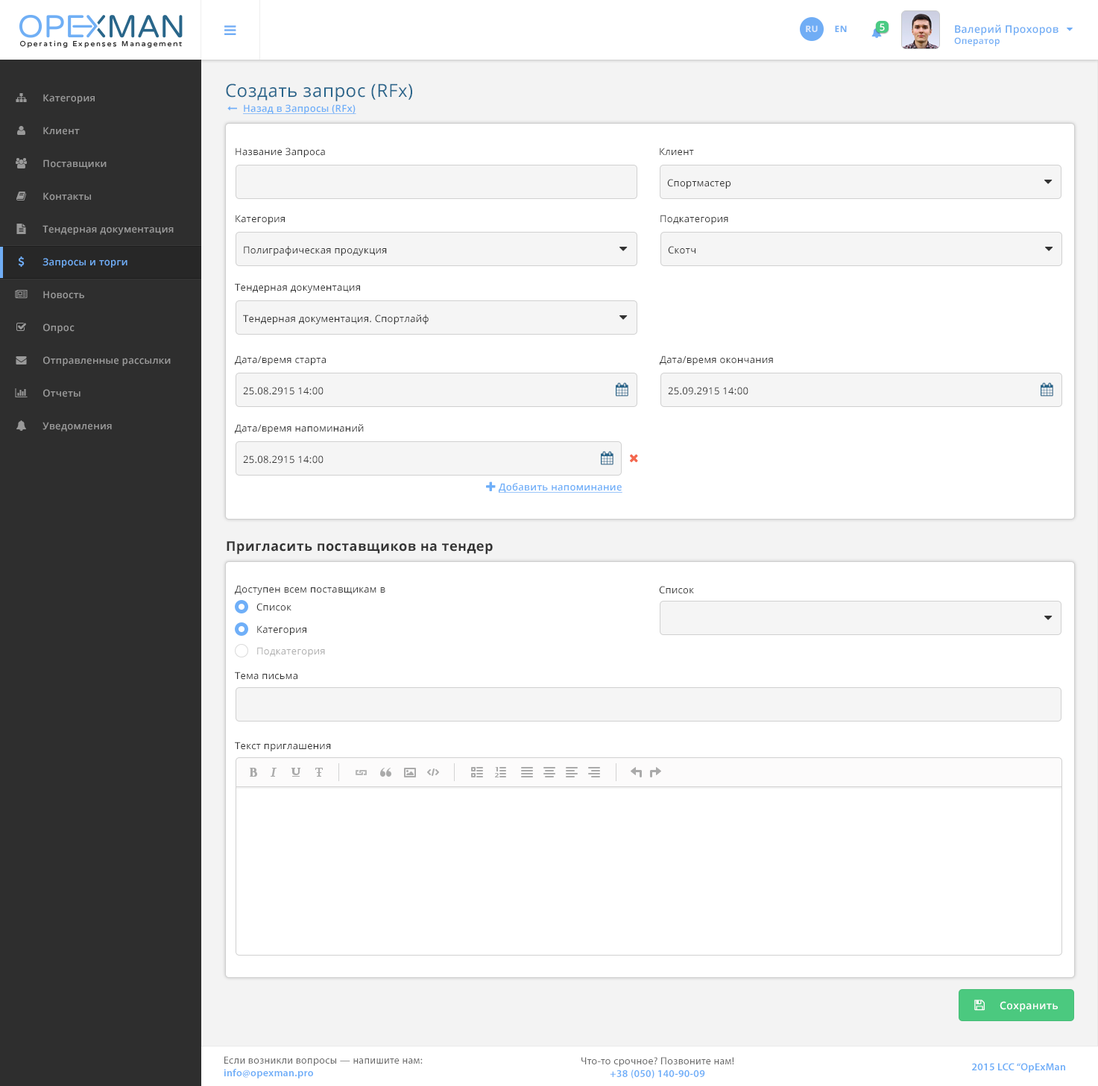
<style>
.page{position:relative;width:1098px;height:1086px;background:#ffffff}
.page>*{position:absolute;margin:0}
.t1{font:8.9px "OpenSans-Bold";letter-spacing:0.025em;color:#dbe8fc;text-transform:uppercase}
.t2{font:8.9px "OpenSans-Bold";letter-spacing:0.025em;color:#70adf5;text-transform:uppercase}
.t3{font:9.7px "OpenSans-Semibold";letter-spacing:0.025em;color:#ffffff}
.t4{font:10.4px "OpenSans-Semibold";letter-spacing:0.025em;color:#70adf5}
.t5{font:8.9px "OpenSans-Semibold";letter-spacing:0.025em;color:#70adf5}
.t6{font:17.9px "OpenSans";letter-spacing:0.025em;color:#29658b}
.t7{font:9.7px "OpenSans-Semibold";letter-spacing:0.025em;color:#999999}
.t8{font:9.7px "OpenSans-Semibold";letter-spacing:0.025em;color:#6faff8;text-decoration:underline}
.t9{font:9.7px "OpenSans";letter-spacing:0.025em;color:#333333}
.t10{font:9.7px "OpenSans-Semibold";letter-spacing:0.025em;color:#70adf5}
.t11{font:13.4px "OpenSans-Bold";letter-spacing:0.025em;color:#333333}
.t12{font:9.7px "OpenSans";letter-spacing:0.025em;color:#adadad}
.t13{font:10.4px "OpenSans-Semibold";letter-spacing:0.025em;color:#ffffff}
.t14{font:10.4px "MyriadPro-Regular";letter-spacing:0.025em;color:#696969}
.t15{font:10.4px "MyriadPro-Semibold";letter-spacing:0.025em;color:#6eaef8}
</style>
<div class="page">
<p class="t1" style="left:806px;top:25px;width:12px;height:7px">Ru</p>
<p class="t2" style="left:835px;top:25px;width:12px;height:7px">EN</p>
<p class="t3" style="left:880px;top:23px;width:5px;height:8px">5</p>
<p class="t4" style="left:954px;top:25px;width:104px;height:21px">Валерий Прохоров<br><span class="t5">Оператор</span></p>
<p class="t6" style="left:226px;top:83px;width:186px;height:18px">Создать запрос (RFx)</p>
<p class="t7" style="left:43px;top:94px;width:52px;height:10px">Категория</p>
<p class="t8" style="left:243px;top:104px;width:113px;height:10px">Назад в Запросы (RFx)</p>
<p class="t7" style="left:43px;top:127px;width:37px;height:8px">Клиент</p>
<p class="t9" style="left:236px;top:148px;width:89px;height:9px">Название Запроса</p>
<p class="t9" style="left:660px;top:148px;width:34px;height:8px">Клиент</p>
<p class="t7" style="left:43px;top:160px;width:64px;height:9px">Поставщики</p>
<p class="t9" style="left:667px;top:179px;width:63px;height:10px">Спортмастер</p>
<p class="t7" style="left:43px;top:192px;width:48px;height:9px">Контакты</p>
<p class="t9" style="left:236px;top:215px;width:49px;height:9px">Категория</p>
<p class="t9" style="left:660px;top:215px;width:68px;height:9px">Подкатегория</p>
<p class="t7" style="left:42px;top:225px;width:132px;height:10px">Тендерная документация</p>
<p class="t9" style="left:244px;top:246px;width:143px;height:10px">Полиграфическая продукция</p>
<p class="t9" style="left:668px;top:246px;width:27px;height:8px">Скотч</p>
<p class="t10" style="left:42px;top:258px;width:85px;height:10px">Запросы и торги</p>
<p class="t7" style="left:43px;top:291px;width:41px;height:8px">Новость</p>
<p class="t9" style="left:235px;top:283px;width:125px;height:10px">Тендерная документация</p>
<p class="t9" style="left:243px;top:315px;width:186px;height:9px">Тендерная документация. Спортлайф</p>
<p class="t7" style="left:43px;top:324px;width:32px;height:9px">Опрос</p>
<p class="t7" style="left:43px;top:356px;width:128px;height:10px">Отправленные рассылки</p>
<p class="t9" style="left:235px;top:356px;width:91px;height:9px">Дата/время старта</p>
<p class="t9" style="left:660px;top:356px;width:113px;height:9px">Дата/время окончания</p>
<p class="t7" style="left:43px;top:389px;width:38px;height:8px">Отчеты</p>
<p class="t9" style="left:243px;top:387px;width:81px;height:8px">25.08.2915 14:00</p>
<p class="t9" style="left:668px;top:387px;width:80px;height:8px">25.09.2915 14:00</p>
<p class="t7" style="left:42px;top:422px;width:70px;height:10px">Уведомления</p>
<p class="t9" style="left:235px;top:424px;width:129px;height:10px">Дата/время напоминаний</p>
<p class="t9" style="left:243px;top:455px;width:81px;height:9px">25.08.2915 14:00</p>
<p class="t8" style="left:499px;top:483px;width:123px;height:10px">Добавить напоминание</p>
<p class="t11" style="left:227px;top:541px;width:266px;height:14px">Пригласить поставщиков на тендер</p>
<p class="t9" style="left:235px;top:585px;width:150px;height:10px">Доступен всем поставщикам в</p>
<p class="t9" style="left:659px;top:586px;width:35px;height:8px">Список</p>
<p class="t9" style="left:256px;top:603px;width:35px;height:8px">Список</p>
<p class="t9" style="left:257px;top:625px;width:49px;height:10px">Категория</p>
<p class="t12" style="left:257px;top:647px;width:68px;height:10px">Подкатегория</p>
<p class="t9" style="left:235px;top:672px;width:62px;height:8px">Тема письма</p>
<p class="t9" style="left:235px;top:742px;width:96px;height:9px">Текст приглашения</p>
<p class="t13" style="left:1000px;top:1001px;width:58px;height:11px">Сохранить</p>
<p class="t14" style="left:224px;top:1056px;width:199px;height:23px">Если возникли вопросы — напишите нам:<br><span class="t15">info@opexman.pro</span></p>
<p class="t14" style="left:581px;top:1057px;width:153px;height:22px;text-align:center">Что-то срочное? Позвоните нам!<br><span class="t15">+38 (050) 140-90-09</span></p>
<p class="t15" style="left:972px;top:1063px;width:93px;height:10px">2015 LCC “OpExMan</p>
</div>
